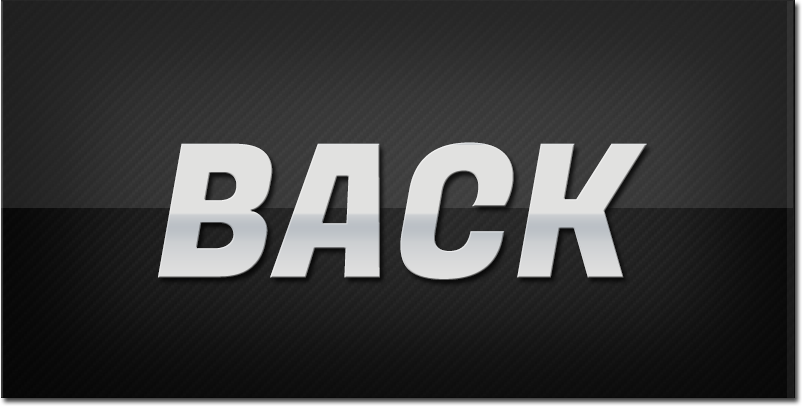
<style>
.page{position:relative;width:802px;height:406px}
.page>*{position:absolute;margin:0}
.t1{font:185.2px "FugazOne-Regular";color:#dfdfdf}
</style>
<div class="page">
<p class="t1" style="left:158px;top:142px;width:489px;height:138px">BACK</p>
</div>
